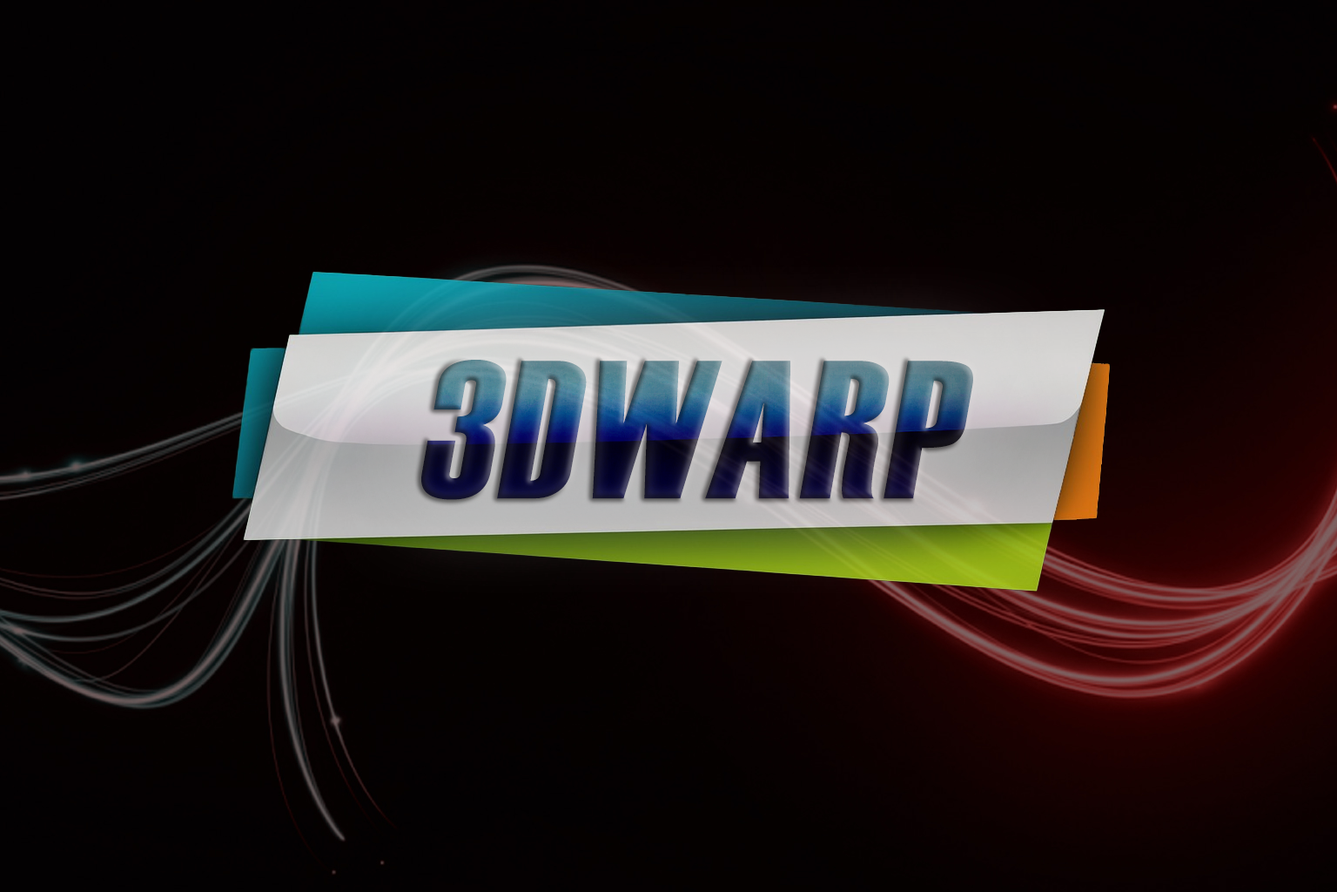
<style>
.page{position:relative;width:1337px;height:892px}
.page>*{position:absolute;margin:0}
.t1{font:195.9px "Haettenschweiler";letter-spacing:0.03em;font-style:italic}
</style>
<div class="page">
<p class="t1" style="left:421px;top:360px;width:552px;height:140px">3DWARP</p>
</div>
